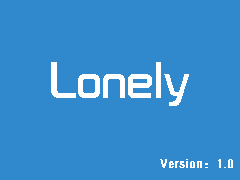
<style>
.page{position:relative;width:240px;height:180px;background:#2f89cc}
.page>*{position:absolute;margin:0}
.t1{font:48px "TRENDS";color:#ffffff}
.t2{font:12px "FZYTK--GBK1-0";color:#ffffff;font-weight:bold}
</style>
<div class="page">
<p class="t1" style="left:51px;top:62px;width:138px;height:44px">Lonely</p>
<p class="t2" style="left:160px;top:159px;width:73px;height:9px">Version：1.0</p>
</div>
